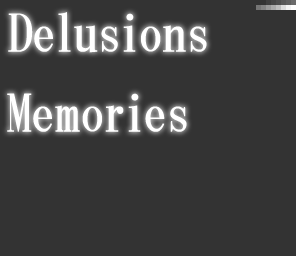
<style>
.page{position:relative;width:296px;height:256px;background:#333333}
.page>*{position:absolute;margin:0}
.t1{font:52px/80px "HGMinchoB";letter-spacing:-0.025em;color:#ffffff}
.t2{font:52px/80px "HGMinchoB";letter-spacing:-0.05em;color:#ffffff}
</style>
<div class="page">
<p class="t1" style="left:7px;top:12px;width:200px;height:120px">Delusions<br>Memo<span class="t2">r</span>ies</p>
</div>
